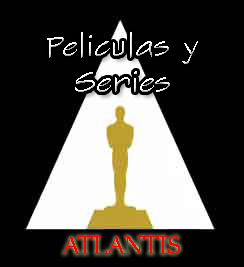
<style>
.page{position:relative;width:244px;height:267px;background:#010101}
.page>*{position:absolute;margin:0}
.t1{font:30px "SketchFlowPrint"}
.t2{font:30px "SitkaBanner";color:#fa0202}
</style>
<div class="page">
<p class="t1" style="left:47px;top:32px;width:151px;height:60px;text-align:center">Peliculas y<br>Series</p>
<p class="t2" style="left:62px;top:236px;width:118px;height:18px">ATLANTIS</p>
</div>
